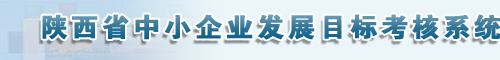
<style>
.page{position:relative;width:500px;height:60px;background:#ecf5f9}
.page>*{position:absolute;margin:0}
.t1{font:26.4px "FZDHTJW--GB1-0";letter-spacing:0.1em;font-weight:bold;scale:1.04 1}
</style>
<div class="page">
<p class="t1" style="left:42px;top:14px;width:459px;height:26px">陕西省中小企业发展目标考核系统</p>
</div>
